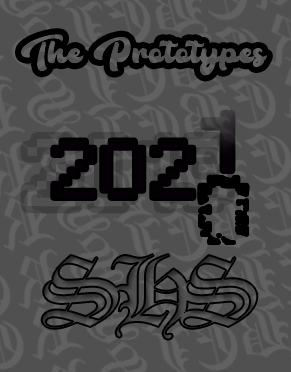
<style>
.page{position:relative;width:291px;height:372px;background:#515051}
.page>*{position:absolute;margin:0}
.t1{font:32px "TheBambankScript";color:#535253}
.t2{font:77.2px "Small Fonts";scale:1.59 1}
.t3{font:76.6px "Small Fonts";color:#050005;scale:1.37 1}
.t4{font:87.2px "Small Fonts";color:#000000;scale:1.36 1}
.t5{font:98.4px "OldEnglishTextMT";letter-spacing:-0.14em}
</style>
<div class="page">
<p class="t1" style="left:21px;top:34px;width:246px;height:42px">The Prototypes</p>
<p class="t1" style="left:21px;top:34px;width:246px;height:42px">The Prototypes</p>
<p class="t2" style="left:203px;top:113px;width:30px;height:58px">1</p>
<p class="t2" style="left:203px;top:113px;width:30px;height:58px">1</p>
<p class="t2" style="left:203px;top:113px;width:30px;height:58px">1</p>
<p class="t3" style="left:53px;top:140px;width:141px;height:58px">202</p>
<p class="t4" style="left:200px;top:177px;width:47px;height:66px">0</p>
<p class="t5" style="left:41px;top:254px;width:217px;height:86px">SHS</p>
</div>
